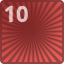
<style>
.page{position:relative;width:64px;height:64px}
.page>*{position:absolute;margin:0}
.t1{font:22px "OpenSans-Bold";color:#e4bebc;font-variant:small-caps}
</style>
<div class="page">
<p class="t1" style="left:4px;top:6px;width:24px;height:16px">10</p>
</div>
